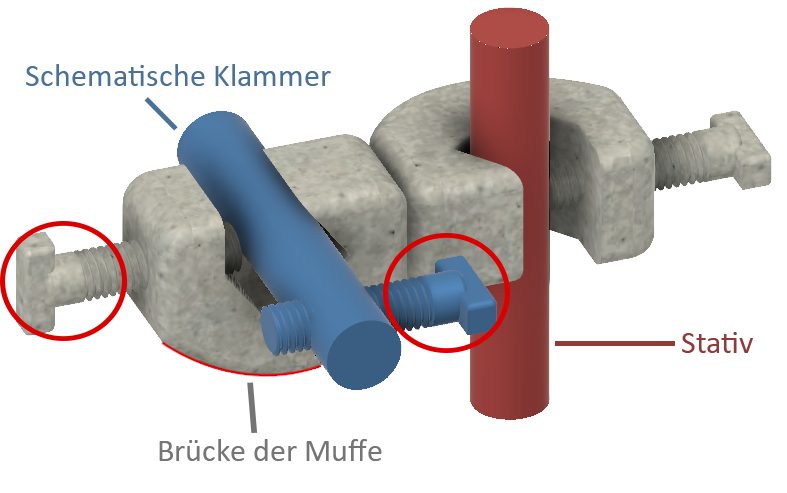
<style>
.page{position:relative;width:787px;height:493px;background:#ffffff}
.page>*{position:absolute;margin:0}
.t1{font:32px "Calibri";color:#49729b}
.t2{font:32px "Calibri";color:#913b38}
.t3{font:32px "Calibri";color:#757575}
</style>
<div class="page">
<p class="t1" style="left:26px;top:64px;width:305px;height:22px">Schematische Klammer</p>
<p class="t2" style="left:682px;top:332px;width:71px;height:21px">Stativ</p>
<p class="t3" style="left:159px;top:439px;width:223px;height:22px">Brücke der Muffe</p>
</div>
